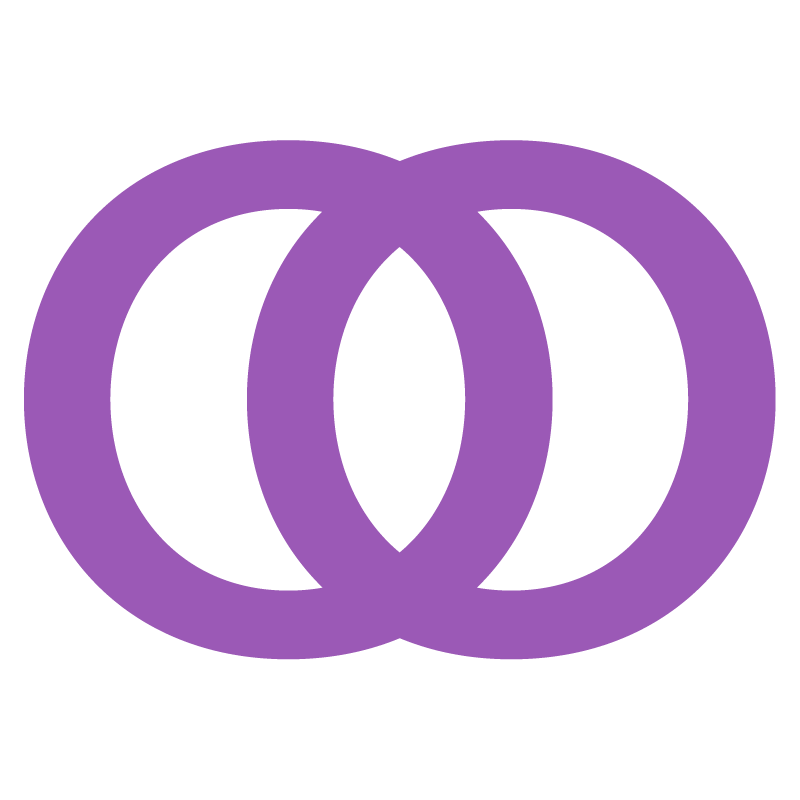
<style>
.page{position:relative;width:800px;height:800px;background:#ffffff}
.page>*{position:absolute;margin:0}
.t1{font:1024px "ProximaNova-Regular";letter-spacing:-0.37em;color:#9b59b6;scale:1.08 1}
</style>
<div class="page">
<p class="t1" style="left:24px;top:140px;width:752px;height:520px">oo</p>
</div>
